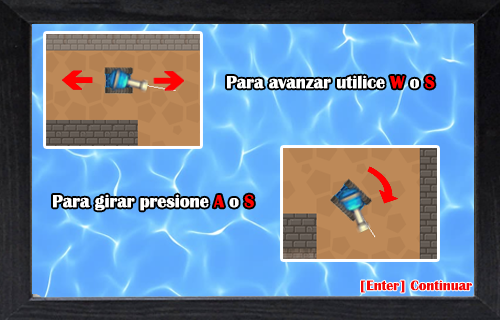
<style>
.page{position:relative;width:500px;height:320px}
.page>*{position:absolute;margin:0}
.t1{font:17.9px "BritannicBold";color:#ffffff}
.t2{font:17.9px "BritannicBold";color:#ff0101}
.t3{font:14px "BritannicBold";color:#f20909}
</style>
<div class="page">
<p class="t1" style="left:227px;top:75px;width:208px;height:14px">Para avanzar utilice <span class="t2">W</span> o <span class="t2">S</span></p>
<p class="t1" style="left:53px;top:194px;width:201px;height:17px">Para girar presione <span class="t2">A </span>o <span class="t2">S</span></p>
<p class="t3" style="left:361px;top:280px;width:111px;height:13px">[Enter] Continuar</p>
</div>
